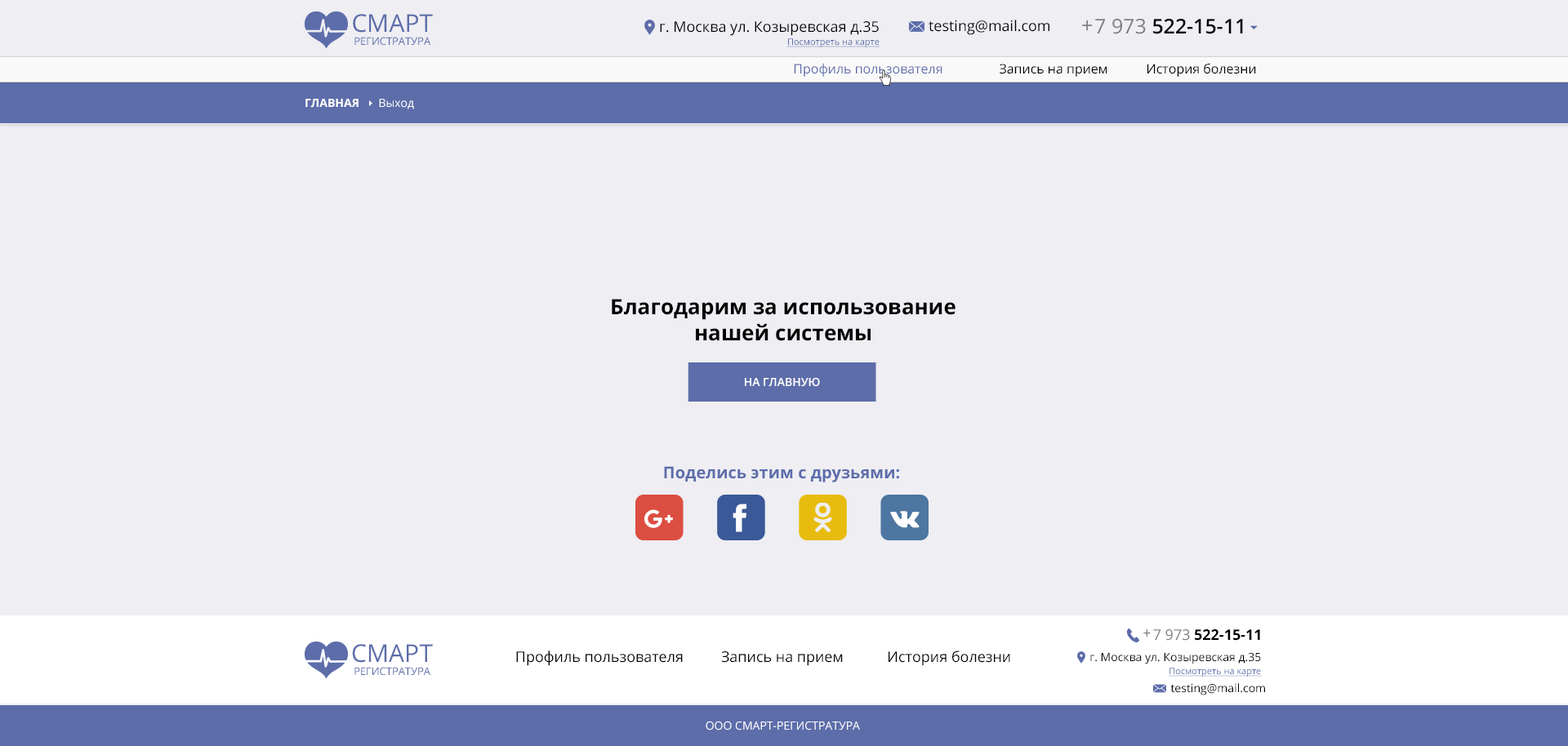
<style>
.page{position:relative;width:1568px;height:746px;background:#eeeef3}
.page>*{position:absolute;margin:0}
.t1{font:10.6px/13.1px "OpenSans";letter-spacing:-0.005em;color:#5d6daa}
.t2{font:24.5px/13.1px "OpenSans";color:#5d6daa}
.t3{font:14.7px/11.4px "OpenSans";color:#000000}
.t4{font:9px/13.1px "OpenSans";color:#5d6daa;text-decoration:underline}
.t5{font:14.7px "OpenSans";color:#000000}
.t6{font:20.4px "OpenSans";color:#7b7b81}
.t7{font:20.4px "OpenSans-Semibold";color:#000000}
.t8{font:20.4px "OpenSans";color:#000000}
.t9{font:13.1px "OpenSans";color:#000000}
.t10{font:13.1px "OpenSans";color:#5d6daa}
.t11{font:11.4px "OpenSans-Bold";color:#ffffff}
.t12{font:11.4px "OpenSans";color:#ffffff}
.t13{font:21.2px "OpenSans-Bold";color:#000000}
.t14{font:11.4px "OpenSans-Semibold";color:#ffffff;text-transform:uppercase}
.t15{font:16.3px "OpenSans-Bold";color:#5d6daa}
.t16{font:14.7px "OpenSans";color:#7b7b81}
.t17{font:14.7px "OpenSans-Bold";color:#000000}
.t18{font:11.4px/11.4px "OpenSans";color:#000000}
.t19{font:11.4px "OpenSans";color:#000000}
</style>
<div class="page">
<p class="t1" style="left:353px;top:14px;width:80px;height:31px;text-align:center"><span class="t2">CМАРТ<br></span>РЕГИСТРАТУРА</p>
<p class="t3" style="left:660px;top:21px;width:220px;height:26px;text-align:right">г. Москва ул. Козыревская д.35<br><span class="t4">Посмотреть на карте</span></p>
<p class="t5" style="left:929px;top:20px;width:120px;height:15px">testing@mail.com</p>
<p class="t6" style="left:1082px;top:20px;width:10px;height:11px">+</p>
<p class="t7" style="left:1095px;top:19px;width:148px;height:15px"><span class="t8">  </span><span class="t6">7 973 </span>522-15-11</p>
<p class="t9" style="left:794px;top:63px;width:462px;height:14px"><span class="t10">Профиль пользователя</span>  Запись на прием  История болезни</p>
<p class="t11" style="left:305px;top:99px;width:109px;height:10px">ГЛАВНАЯ      <span class="t12">Выход</span></p>
<p class="t13" style="left:612px;top:299px;width:344px;height:42px;text-align:center">Благодарим за использование<br>нашей системы</p>
<p class="t14" style="left:745px;top:377px;width:75px;height:10px">НА ГЛАВНУЮ</p>
<p class="t15" style="left:664px;top:466px;width:235px;height:17px">Поделись этим с друзьями:</p>
<p class="t16" style="left:1143px;top:630px;width:8px;height:7px">+</p>
<p class="t17" style="left:1153px;top:630px;width:107px;height:11px"><span class="t5">  </span><span class="t16">7 973 </span>522-15-11</p>
<p class="t1" style="left:352px;top:644px;width:81px;height:31px;text-align:center"><span class="t2">CМАРТ<br></span>РЕГИСТРАТУРА</p>
<p class="t5" style="left:516px;top:651px;width:494px;height:15px">Профиль пользователя  Запись на прием      История болезни</p>
<p class="t18" style="left:1090px;top:653px;width:172px;height:24px;text-align:right">г. Москва ул. Козыревская д.35<br><span class="t4">Посмотреть на карте</span></p>
<p class="t19" style="left:1170px;top:684px;width:95px;height:12px">testing@mail.com</p>
<p class="t12" style="left:706px;top:721px;width:154px;height:10px">ООО СМАРТ-РЕГИСТРАТУРА</p>
</div>
